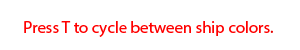
<style>
.page{position:relative;width:300px;height:50px;background:#ffffff}
.page>*{position:absolute;margin:0}
.t1{font:16.7px "MyriadPro-Regular";color:#ff0000}
.t2{font:16.7px "MyriadPro-Regular";color:#e60303}
</style>
<div class="page">
<p class="t1" style="left:24px;top:21px;width:249px;height:16px">Press T to cycle between ship colors<span class="t2">.</span></p>
</div>
